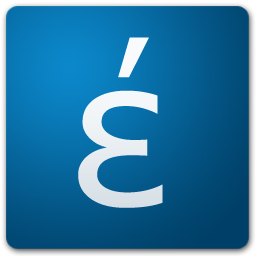
<style>
.page{position:relative;width:256px;height:256px}
.page>*{position:absolute;margin:0}
.t1{font:222.9px "SegoeUI";color:#f8fafc;scale:1.04 1}
</style>
<div class="page">
<p class="t1" style="left:78px;top:37px;width:85px;height:171px">έ</p>
</div>
